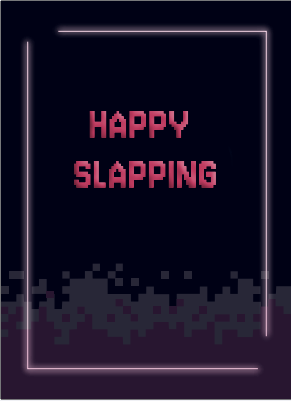
<style>
.page{position:relative;width:291px;height:401px;background:#000115}
.page>*{position:absolute;margin:0}
.t1{font:50px/50px "Jersey10-Regular";letter-spacing:0.025em;scale:0.87 1}
</style>
<div class="page">
<p class="t1" style="left:74px;top:110px;width:142px;height:78px;text-align:center">HAPPY <br>SLAPPING</p>
</div>
